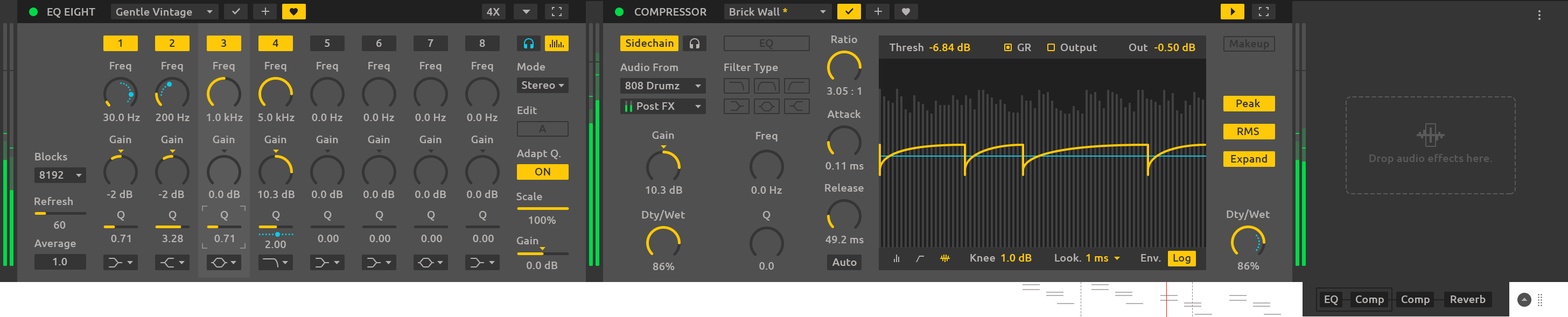
<style>
.page{position:relative;width:1568px;height:317px;background:#505050}
.page>*{position:absolute;margin:0}
.t1{font:10.8px "Ubuntu-Medium";letter-spacing:0.01em;color:#b5b2b1}
.t2{font:10.8px "Ubuntu-Medium";letter-spacing:0.01em;color:#ffc907}
.t3{font:10.8px "Ubuntu-Medium";letter-spacing:0.01em;color:#353535}
.t4{font:10.8px "Ubuntu-Medium";letter-spacing:0.01em;color:#5a5a5a}
</style>
<div class="page">
<p class="t1" style="left:47px;top:8px;width:48px;height:10px">EQ EIGHT</p>
<p class="t1" style="left:116px;top:8px;width:76px;height:10px">Gentle Vintage</p>
<p class="t1" style="left:487px;top:8px;width:13px;height:8px">4X</p>
<p class="t1" style="left:635px;top:8px;width:71px;height:8px">COMPRESSOR</p>
<p class="t1" style="left:730px;top:8px;width:58px;height:8px">Brick Wall <span class="t2">*</span></p>
<p class="t3" style="left:118px;top:39px;width:4px;height:8px">1</p>
<p class="t3" style="left:170px;top:39px;width:4px;height:8px">2</p>
<p class="t3" style="left:221px;top:39px;width:6px;height:8px">3</p>
<p class="t3" style="left:272px;top:39px;width:6px;height:8px">4</p>
<p class="t1" style="left:325px;top:39px;width:5px;height:8px">5</p>
<p class="t1" style="left:376px;top:39px;width:6px;height:8px">6</p>
<p class="t1" style="left:428px;top:39px;width:5px;height:8px">7</p>
<p class="t1" style="left:479px;top:39px;width:6px;height:8px">8</p>
<p class="t3" style="left:626px;top:39px;width:48px;height:8px">Sidechain</p>
<p class="t3" style="left:760px;top:39px;width:13px;height:10px">EQ</p>
<p class="t1" style="left:831px;top:36px;width:26px;height:7px">Ratio</p>
<p class="t3" style="left:1230px;top:39px;width:39px;height:11px">Makeup</p>
<p class="t1" style="left:890px;top:43px;width:33px;height:8px">Thresh</p>
<p class="t2" style="left:929px;top:43px;width:41px;height:8px">-6.84 dB</p>
<p class="t1" style="left:1017px;top:44px;width:14px;height:7px">GR</p>
<p class="t1" style="left:1060px;top:44px;width:37px;height:9px">Output</p>
<p class="t1" style="left:1129px;top:44px;width:19px;height:7px">Out</p>
<p class="t2" style="left:1154px;top:43px;width:41px;height:8px">-0.50 dB</p>
<p class="t1" style="left:110px;top:62px;width:21px;height:10px">Freq</p>
<p class="t1" style="left:162px;top:62px;width:21px;height:10px">Freq</p>
<p class="t1" style="left:213px;top:62px;width:22px;height:10px">Freq</p>
<p class="t1" style="left:265px;top:62px;width:21px;height:10px">Freq</p>
<p class="t1" style="left:317px;top:62px;width:21px;height:10px">Freq</p>
<p class="t1" style="left:368px;top:62px;width:22px;height:10px">Freq</p>
<p class="t1" style="left:420px;top:62px;width:22px;height:10px">Freq</p>
<p class="t1" style="left:472px;top:62px;width:21px;height:10px">Freq</p>
<p class="t1" style="left:517px;top:62px;width:28px;height:9px">Mode</p>
<p class="t1" style="left:620px;top:63px;width:58px;height:8px">Audio From</p>
<p class="t1" style="left:724px;top:63px;width:54px;height:10px">Filter Type</p>
<p class="t1" style="left:522px;top:81px;width:33px;height:8px">Stereo</p>
<p class="t1" style="left:625px;top:82px;width:55px;height:7px">808 Drumz</p>
<p class="t1" style="left:827px;top:87px;width:34px;height:8px">3.05 : 1</p>
<p class="t3" style="left:1236px;top:99px;width:25px;height:8px">Peak</p>
<p class="t1" style="left:103px;top:114px;width:37px;height:7px">30.0 Hz</p>
<p class="t1" style="left:156px;top:114px;width:34px;height:7px">200 Hz</p>
<p class="t1" style="left:207px;top:113px;width:36px;height:8px">1.0 kHz</p>
<p class="t1" style="left:258px;top:113px;width:37px;height:8px">5.0 kHz</p>
<p class="t1" style="left:312px;top:114px;width:30px;height:7px">0.0 Hz</p>
<p class="t1" style="left:363px;top:114px;width:31px;height:7px">0.0 Hz</p>
<p class="t1" style="left:415px;top:114px;width:31px;height:7px">0.0 Hz</p>
<p class="t1" style="left:467px;top:114px;width:31px;height:7px">0.0 Hz</p>
<p class="t1" style="left:517px;top:106px;width:20px;height:8px">Edit</p>
<p class="t1" style="left:637px;top:102px;width:38px;height:8px">Post FX</p>
<p class="t1" style="left:827px;top:110px;width:34px;height:8px">Attack</p>
<p class="t3" style="left:538px;top:125px;width:9px;height:7px">A</p>
<p class="t1" style="left:109px;top:136px;width:22px;height:7px">Gain</p>
<p class="t1" style="left:161px;top:136px;width:22px;height:7px">Gain</p>
<p class="t1" style="left:213px;top:136px;width:22px;height:7px">Gain</p>
<p class="t1" style="left:264px;top:136px;width:22px;height:7px">Gain</p>
<p class="t1" style="left:316px;top:136px;width:22px;height:7px">Gain</p>
<p class="t1" style="left:368px;top:136px;width:22px;height:7px">Gain</p>
<p class="t1" style="left:419px;top:136px;width:23px;height:7px">Gain</p>
<p class="t1" style="left:471px;top:136px;width:22px;height:7px">Gain</p>
<p class="t1" style="left:652px;top:131px;width:22px;height:8px">Gain</p>
<p class="t1" style="left:756px;top:132px;width:22px;height:10px">Freq</p>
<p class="t3" style="left:1237px;top:128px;width:22px;height:7px">RMS</p>
<p class="t1" style="left:516px;top:149px;width:45px;height:10px">Adapt Q.</p>
<p class="t1" style="left:35px;top:152px;width:32px;height:8px">Blocks</p>
<p class="t3" style="left:1231px;top:155px;width:36px;height:10px">Expand</p>
<p class="t4" style="left:1369px;top:154px;width:123px;height:10px">Drop audio effects here.</p>
<p class="t1" style="left:39px;top:171px;width:25px;height:8px">8192</p>
<p class="t3" style="left:535px;top:168px;width:15px;height:8px">ON</p>
<p class="t1" style="left:825px;top:162px;width:39px;height:8px">0.11 ms</p>
<p class="t1" style="left:646px;top:186px;width:36px;height:8px">10.3 dB</p>
<p class="t1" style="left:825px;top:184px;width:39px;height:8px">Release</p>
<p class="t1" style="left:34px;top:197px;width:39px;height:8px">Refresh</p>
<p class="t1" style="left:107px;top:190px;width:25px;height:8px">-2 dB</p>
<p class="t1" style="left:159px;top:190px;width:25px;height:8px">-2 dB</p>
<p class="t1" style="left:209px;top:190px;width:31px;height:8px">0.0 dB</p>
<p class="t1" style="left:258px;top:190px;width:37px;height:8px">10.3 dB</p>
<p class="t1" style="left:312px;top:190px;width:31px;height:8px">0.0 dB</p>
<p class="t1" style="left:363px;top:190px;width:32px;height:8px">0.0 dB</p>
<p class="t1" style="left:415px;top:190px;width:31px;height:8px">0.0 dB</p>
<p class="t1" style="left:467px;top:190px;width:31px;height:8px">0.0 dB</p>
<p class="t1" style="left:516px;top:192px;width:26px;height:8px">Scale</p>
<p class="t1" style="left:751px;top:186px;width:31px;height:8px">0.0 Hz</p>
<p class="t1" style="left:1227px;top:209px;width:43px;height:11px">Dty/Wet</p>
<p class="t1" style="left:54px;top:221px;width:12px;height:8px">60</p>
<p class="t1" style="left:117px;top:211px;width:8px;height:10px">Q</p>
<p class="t1" style="left:169px;top:211px;width:8px;height:10px">Q</p>
<p class="t1" style="left:220px;top:211px;width:8px;height:10px">Q</p>
<p class="t1" style="left:272px;top:211px;width:8px;height:10px">Q</p>
<p class="t1" style="left:324px;top:211px;width:8px;height:10px">Q</p>
<p class="t1" style="left:375px;top:211px;width:8px;height:10px">Q</p>
<p class="t1" style="left:427px;top:211px;width:8px;height:10px">Q</p>
<p class="t1" style="left:479px;top:211px;width:8px;height:10px">Q</p>
<p class="t1" style="left:529px;top:216px;width:27px;height:8px">100%</p>
<p class="t1" style="left:642px;top:210px;width:43px;height:11px">Dty/Wet</p>
<p class="t1" style="left:762px;top:211px;width:9px;height:10px">Q</p>
<p class="t1" style="left:34px;top:240px;width:42px;height:9px">Average</p>
<p class="t1" style="left:111px;top:235px;width:20px;height:7px">0.71</p>
<p class="t1" style="left:162px;top:235px;width:21px;height:7px">3.28</p>
<p class="t1" style="left:214px;top:235px;width:20px;height:7px">0.71</p>
<p class="t1" style="left:265px;top:241px;width:21px;height:7px">2.00</p>
<p class="t1" style="left:318px;top:235px;width:21px;height:7px">0.00</p>
<p class="t1" style="left:369px;top:235px;width:21px;height:7px">0.00</p>
<p class="t1" style="left:421px;top:235px;width:21px;height:7px">0.00</p>
<p class="t1" style="left:473px;top:235px;width:21px;height:7px">0.00</p>
<p class="t1" style="left:516px;top:237px;width:22px;height:7px">Gain</p>
<p class="t1" style="left:825px;top:236px;width:39px;height:7px">49.2 ms</p>
<p class="t1" style="left:53px;top:258px;width:14px;height:7px">1.0</p>
<p class="t1" style="left:970px;top:254px;width:25px;height:8px">Knee</p>
<p class="t2" style="left:1001px;top:254px;width:31px;height:8px">1.0 dB</p>
<p class="t1" style="left:1055px;top:254px;width:26px;height:8px">Look.</p>
<p class="t2" style="left:1086px;top:254px;width:22px;height:8px">1 ms</p>
<p class="t1" style="left:1141px;top:254px;width:20px;height:8px">Env.</p>
<p class="t3" style="left:1173px;top:254px;width:18px;height:10px">Log</p>
<p class="t1" style="left:527px;top:261px;width:31px;height:8px">0.0 dB</p>
<p class="t1" style="left:653px;top:263px;width:22px;height:7px">86%</p>
<p class="t1" style="left:759px;top:262px;width:15px;height:8px">0.0</p>
<p class="t1" style="left:832px;top:258px;width:25px;height:8px">Auto</p>
<p class="t1" style="left:1237px;top:262px;width:22px;height:8px">86%</p>
<p class="t1" style="left:1325px;top:296px;width:13px;height:9px">EQ</p>
<p class="t1" style="left:1356px;top:296px;width:28px;height:9px">Comp</p>
<p class="t1" style="left:1402px;top:296px;width:28px;height:9px">Comp</p>
<p class="t1" style="left:1451px;top:295px;width:35px;height:8px">Reverb</p>
</div>
